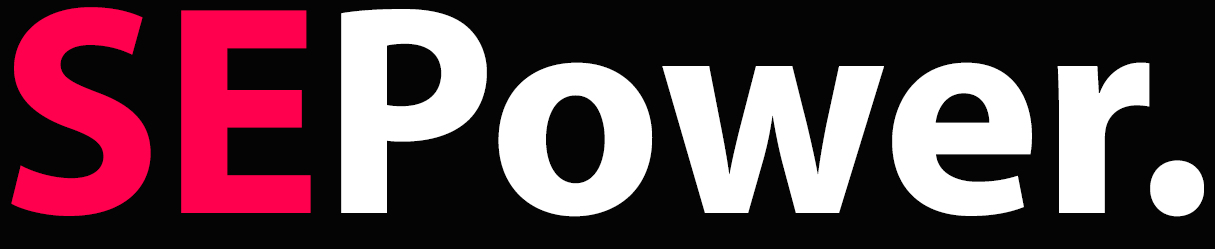
<style>
.page{position:relative;width:1215px;height:249px;background:#040404}
.page>*{position:absolute;margin:0}
.t1{font:300px "MyriadPro-Bold";color:#ffffff}
.t2{font:300px "MyriadPro-Bold";color:#ff004f}
</style>
<div class="page">
<p class="t1" style="left:11px;top:7px;width:1193px;height:210px"><span class="t2">SE</span>Power.</p>
</div>
